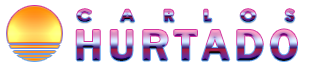
<style>
.page{position:relative;width:311px;height:68px;background:#ffffff}
.page>*{position:absolute;margin:0}
.t1{font:15.6px "CenturyGothic-Bold";letter-spacing:1.5em;font-weight:bold;scale:1.21 1}
.t2{font:43.6px "FranklinGothic-Medium";letter-spacing:0.115em;font-weight:bold}
</style>
<div class="page">
<p class="t1" style="left:77px;top:9px;width:218px;height:13px">CARLOS</p>
<p class="t2" style="left:76px;top:29px;width:221px;height:32px">HURTADO</p>
</div>
